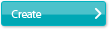
<style>
.page{position:relative;width:110px;height:30px;background:#4dc2cb}
.page>*{position:absolute;margin:0}
.t1{font:11px "MyriadPro-Regular";color:#ffffff}
</style>
<div class="page">
<p class="t1" style="left:11px;top:10px;width:31px;height:8px">Create</p>
</div>
